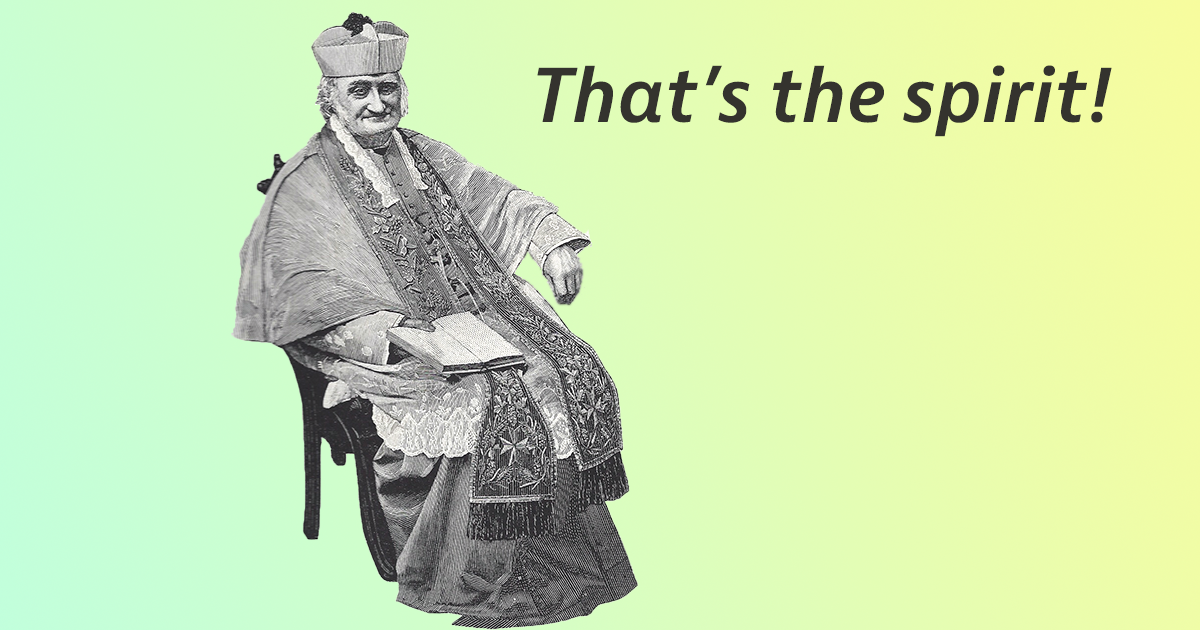
<style>
.page{position:relative;width:1200px;height:630px}
.page>*{position:absolute;margin:0}
.t1{font:72px "BerninaSans-SemiboldItalic";color:#34332e}
</style>
<div class="page">
<p class="t1" style="left:537px;top:65px;width:575px;height:72px">That’s the spirit!</p>
</div>
